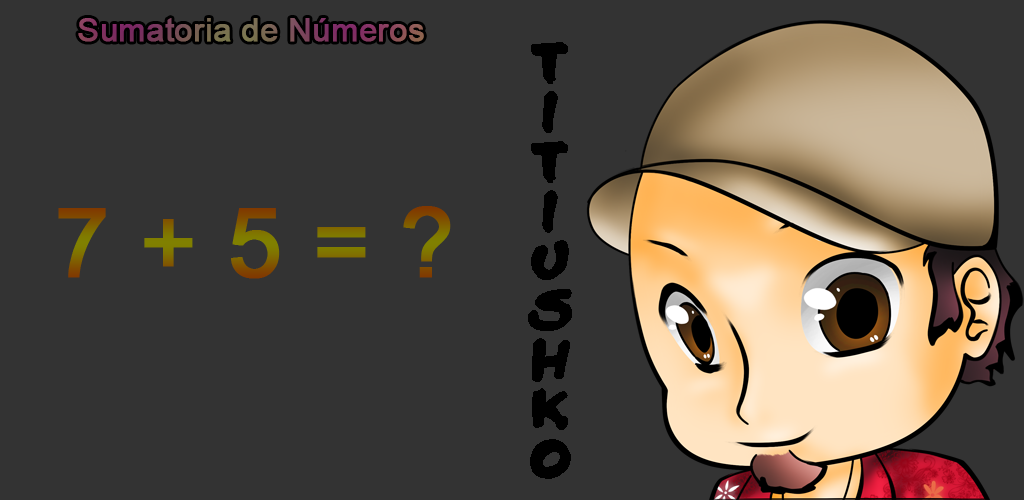
<style>
.page{position:relative;width:1024px;height:500px;background:#333333}
.page>*{position:absolute;margin:0}
.t1{font:32.1px "ArialMT";font-weight:bold}
.t2{font:95.5px "ArialMT";font-weight:bold}
</style>
<div class="page">
<p class="t1" style="left:78px;top:18px;width:346px;height:24px">Sumatoria de Números</p>
<p class="t2" style="left:58px;top:206px;width:393px;height:73px">7 + 5 = ?</p>
</div>
